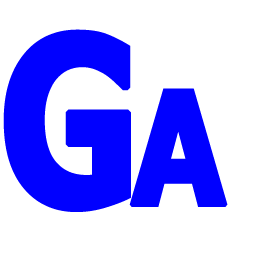
<style>
.page{position:relative;width:256px;height:256px;background:#ffffff}
.page>*{position:absolute;margin:0}
.t1{font:233.5px "Tahoma-Bold";color:#0000ff;text-transform:uppercase;font-weight:bold;scale:0.8 1}
.t2{font:157.5px "Tahoma-Bold";color:#0000ff;text-transform:uppercase;font-weight:bold;scale:0.86 1}
</style>
<div class="page">
<p class="t1" style="left:3px;top:29px;width:128px;height:183px">G</p>
<p class="t2" style="left:129px;top:88px;width:99px;height:119px">A</p>
</div>
